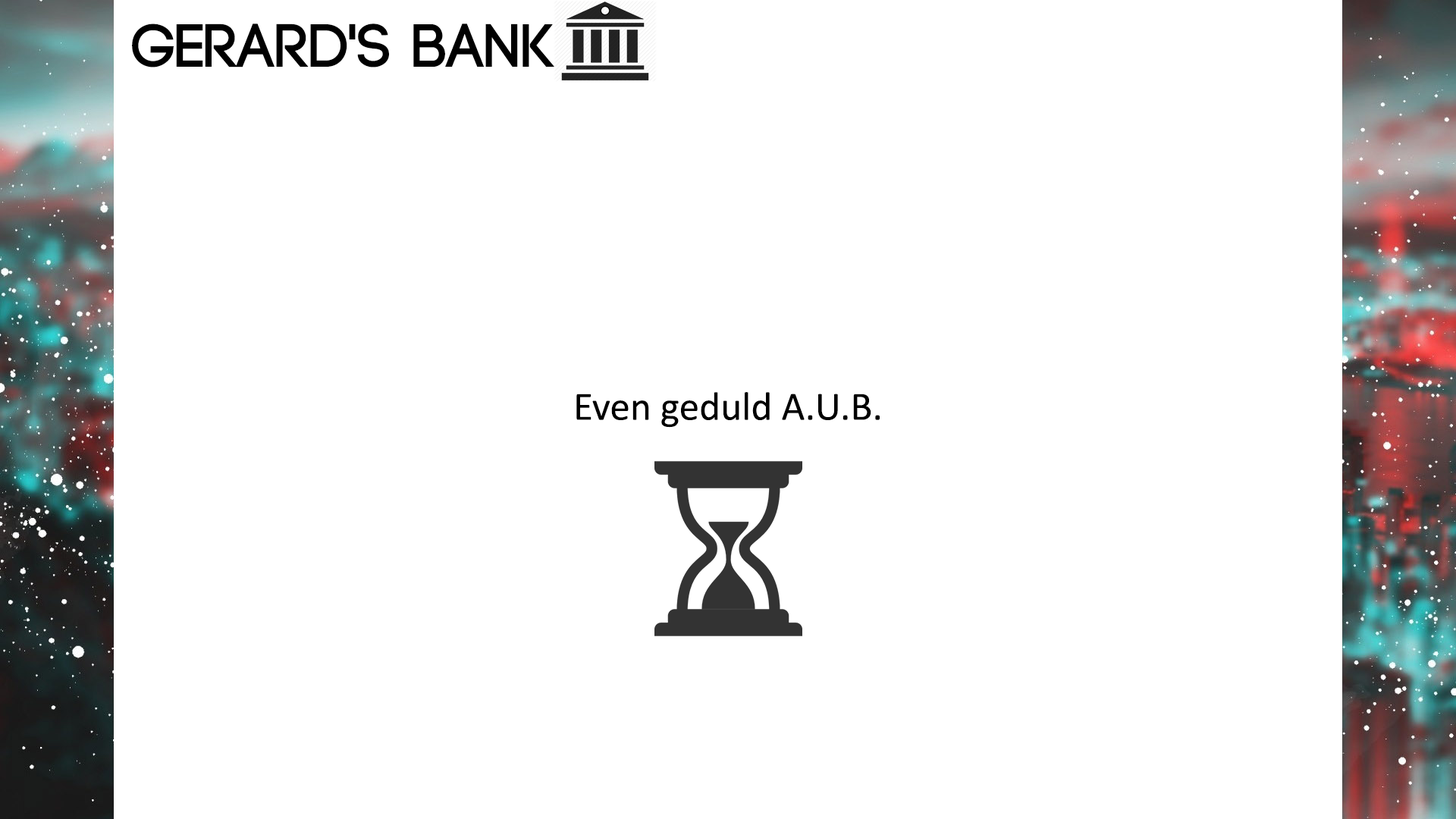
<style>
.page{position:relative;width:1456px;height:819px;background:#ffffff}
.page>*{position:absolute;margin:0}
.t1{font:60.7px "Code-Bold";color:#010101}
.t2{font:40.4px "Calibri";color:#000000}
</style>
<div class="page">
<p class="t1" style="left:132px;top:24px;width:422px;height:43px">Gerard's bank</p>
<p class="t2" style="left:576px;top:392px;width:304px;height:36px">Even geduld A.U.B.</p>
</div>
